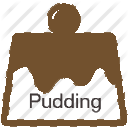
<style>
.page{position:relative;width:128px;height:128px;background:#72512e}
.page>*{position:absolute;margin:0}
.t1{font:20px "MS Sans Serif";color:#403939}
</style>
<div class="page">
<p class="t1" style="left:29px;top:93px;width:72px;height:20px">Pudding</p>
</div>
